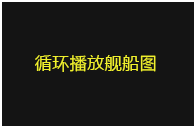
<style>
.page{position:relative;width:196px;height:128px;background:#141414}
.page>*{position:absolute;margin:0}
.t1{font:16.7px "MicrosoftYaHeiUI";letter-spacing:0.05em;color:#f0f02d}
</style>
<div class="page">
<p class="t1" style="left:35px;top:55px;width:121px;height:17px">循环播放舰船图</p>
</div>
